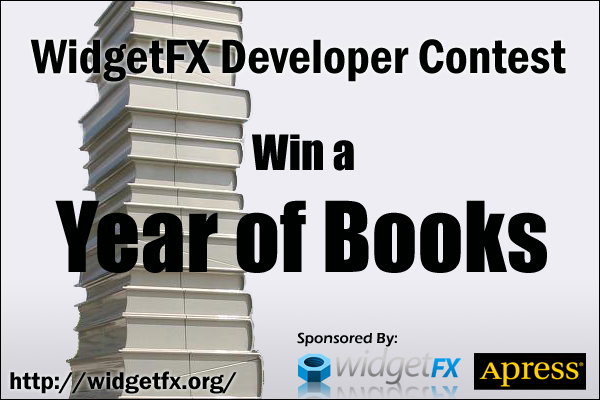
<style>
.page{position:relative;width:600px;height:400px;background:#eeedf3}
.page>*{position:absolute;margin:0}
.t1{font:50px "FranklinGothic-DemiCond";color:#000101}
.t2{font:45px "Impact";color:#000101}
.t3{font:90px "Impact";color:#000101}
.t4{font:15px "ErasITC-Demi";color:#000101}
.t5{font:25px "FranklinGothic-Demi";color:#000101}
</style>
<div class="page">
<p class="t1" style="left:30px;top:39px;width:536px;height:43px">WidgetFX Developer Contest</p>
<p class="t2" style="left:252px;top:134px;width:102px;height:37px">Win a</p>
<p class="t3" style="left:55px;top:200px;width:492px;height:73px">Year of Books</p>
<p class="t4" style="left:297px;top:332px;width:100px;height:15px">Sponsored By:</p>
<p class="t5" style="left:10px;top:371px;width:227px;height:23px">http://widgetfx.org/</p>
</div>
